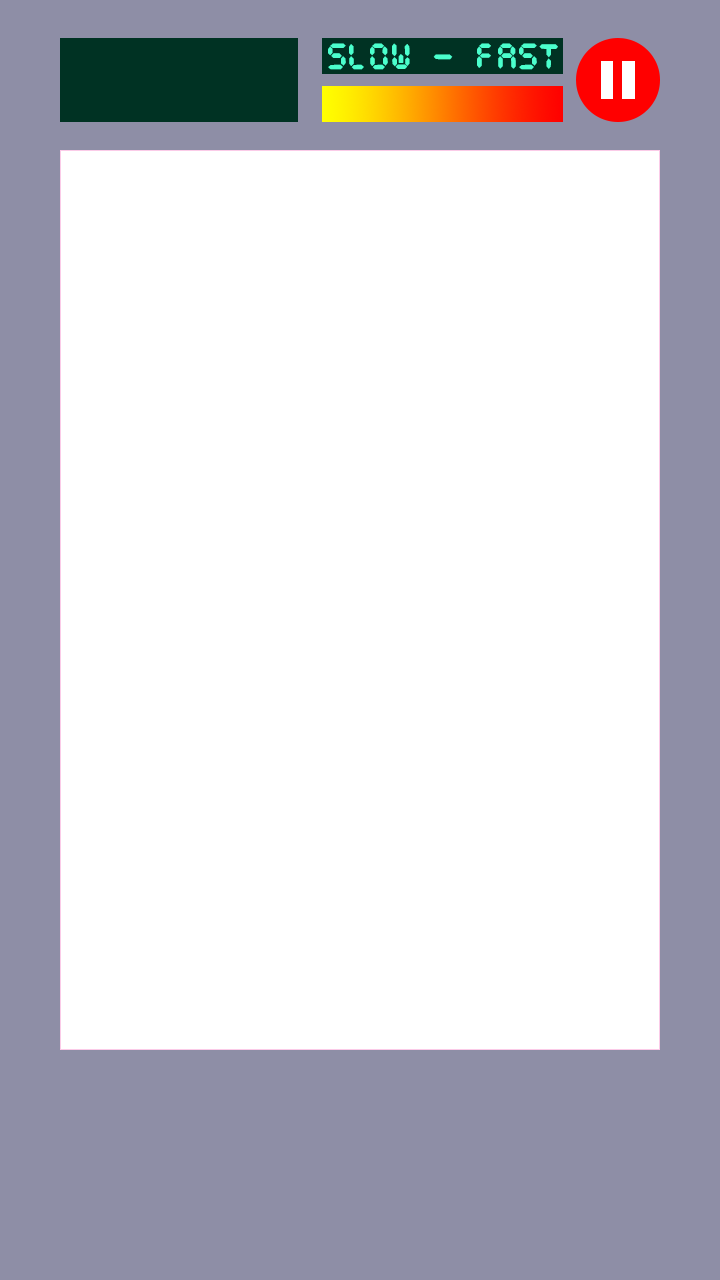
<style>
.page{position:relative;width:720px;height:1280px;background:#ffffff}
.page>*{position:absolute;margin:0}
.t1{font:32px "CursedTimerULiL";letter-spacing:0.04em;color:#4bffcd}
</style>
<div class="page">
<p class="t1" style="left:328px;top:43px;width:230px;height:27px">SLOW - FAST</p>
</div>
